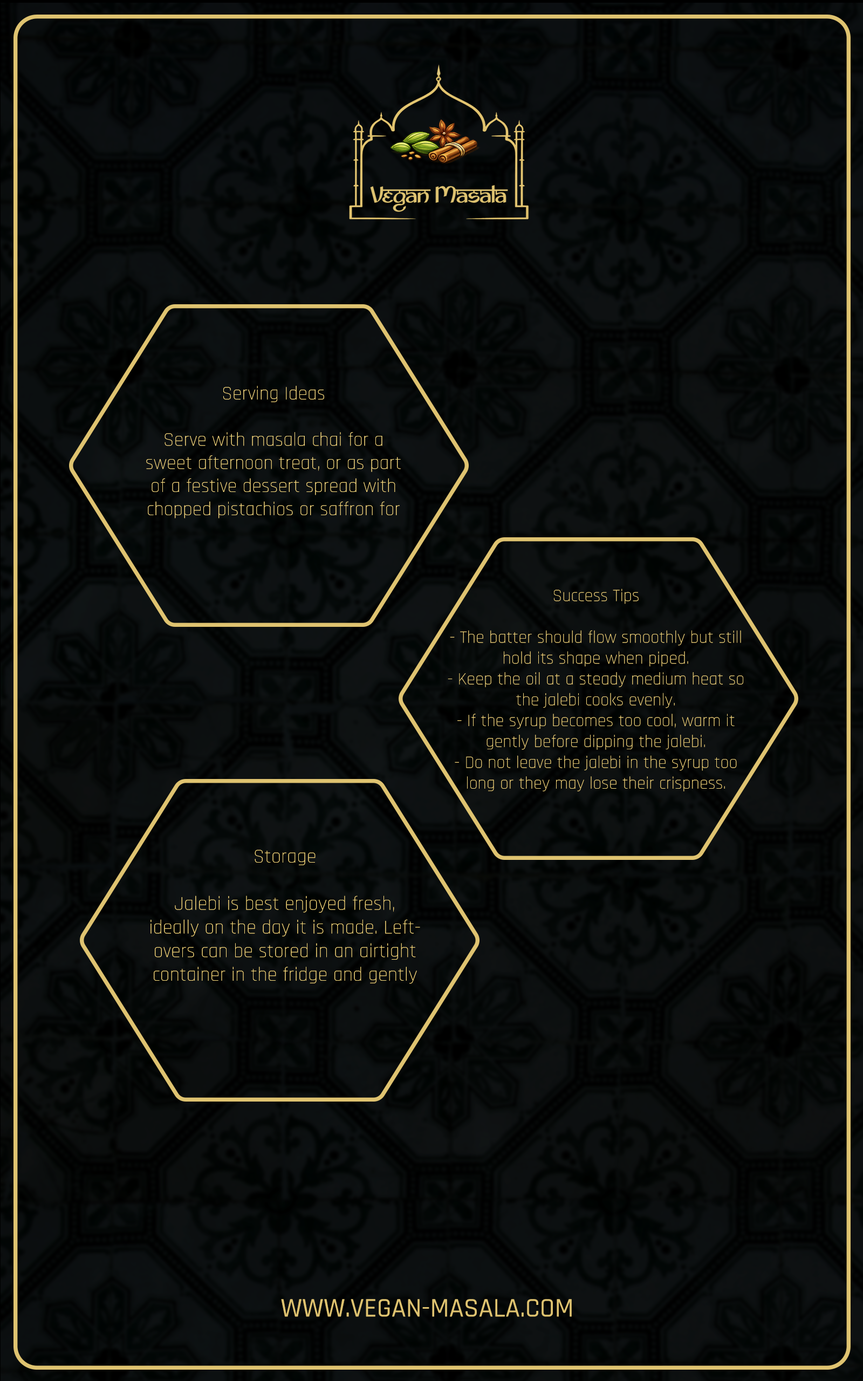
<style>
.page{position:relative;width:863px;height:1381px}
.page>*{position:absolute;margin:0}
.t1{font:19.3px "Rajdhani-Light";color:#ffe083}
.t2{font:17.4px "Rajdhani-Light";color:#ffdf81}
.t3{font:19.7px "Rajdhani-Light";color:#ffdf7f}
.t4{font:27px "Rajdhani-Medium";color:#dfc370}
</style>
<div class="page">
<p class="t1" style="left:146px;top:386px;width:255px;height:133px;text-align:center">Serving Ideas<br><br>Serve with masala chai for a sweet afternoon treat, or as part of a festive dessert spread with chopped pistachios or saffron for garnish.</p>
<p class="t2" style="left:448px;top:589px;width:296px;height:203px;text-align:center">Success Tips<br><br>- The batter should flow smoothly but still hold its shape when piped.<br>- Keep the oil at a steady medium heat so the jalebi cooks evenly.<br>- If the syrup becomes too cool, warm it gently before dipping the jalebi.<br>- Do not leave the jalebi in the syrup too long or they may lose their crispness.</p>
<p class="t3" style="left:151px;top:850px;width:269px;height:134px;text-align:center">Storage<br><br>Jalebi is best enjoyed fresh, <br>ideally on the day it is made. Leftovers can be stored in an airtight <br>container in the fridge and gently reheated in a low oven, though the texture will be softer.</p>
<p class="t4" style="left:281px;top:1299px;width:291px;height:18px">WWW.VEGAN-MASALA.COM</p>
</div>
